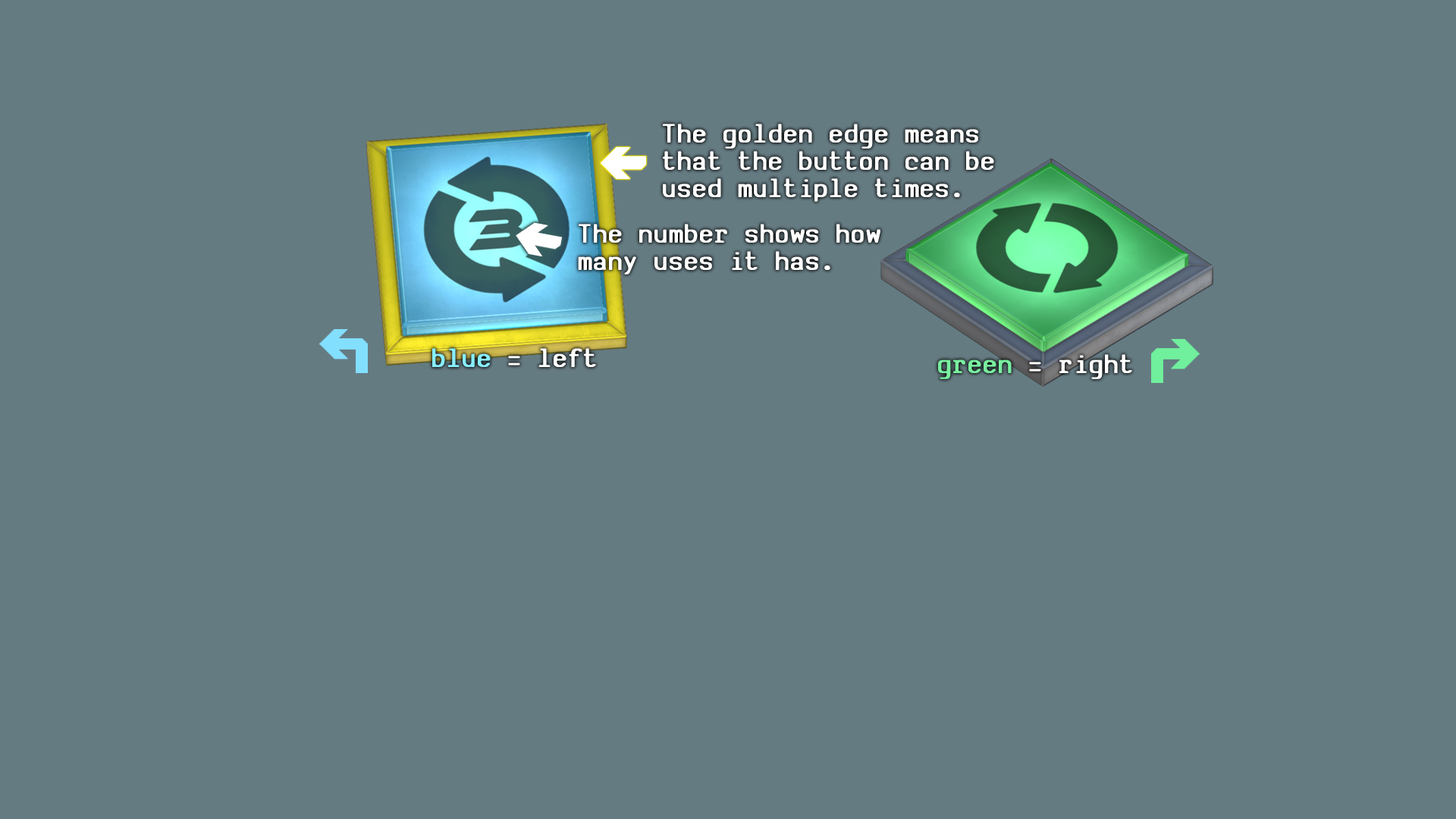
<style>
.page{position:relative;width:1456px;height:819px;background:#657b82}
.page>*{position:absolute;margin:0}
.t1{font:28.7px/27.3px "SVBasicManual-Bold";letter-spacing:0.05em;color:#ffffff;scale:0.95 1}
.t2{font:28.7px "SVBasicManual-Bold";letter-spacing:0.05em;color:#ffffff;scale:0.95 1}
.t3{font:28.7px "SVBasicManual-Bold";letter-spacing:0.05em;color:#87eeff;scale:0.95 1}
.t4{font:28.7px "SVBasicManual-Bold";letter-spacing:0.05em;color:#79efa0;scale:0.95 1}
</style>
<div class="page">
<p class="t1" style="left:663px;top:124px;width:331px;height:78px">The golden edge means<br>that the button can be<br>used multiple times.</p>
<p class="t1" style="left:578px;top:224px;width:302px;height:51px">The number shows how<br>many uses it has.</p>
<p class="t2" style="left:432px;top:348px;width:164px;height:19px"><span class="t3">blue</span> = left</p>
<p class="t2" style="left:938px;top:354px;width:194px;height:25px"><span class="t4">green</span> = right</p>
</div>
